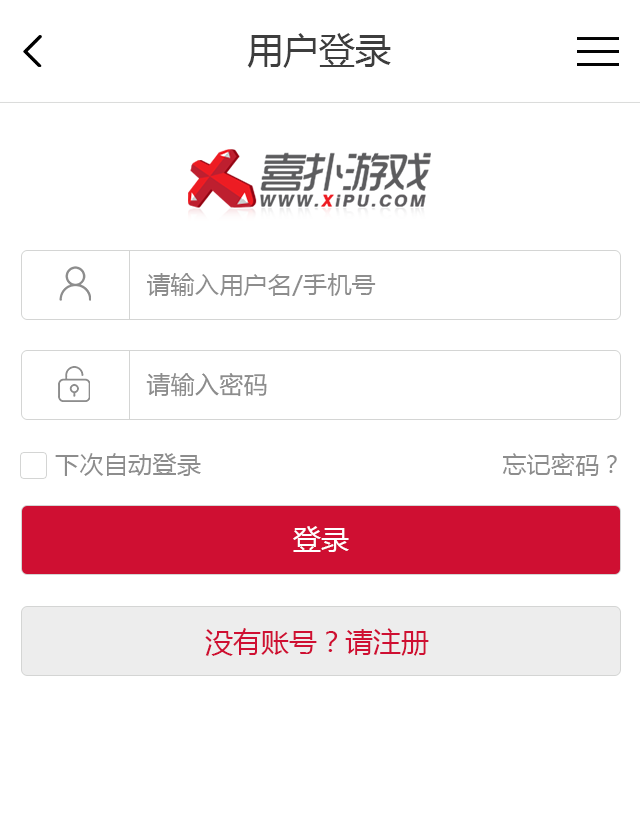
<style>
.page{position:relative;width:640px;height:813px;background:#ffffff}
.page>*{position:absolute;margin:0}
.t1{font:36px "MicrosoftYaHei";color:#3d3d3d}
.t2{font:24px "MicrosoftYaHei";letter-spacing:0.015em;color:#8d8d8d}
.t3{font:28px "MicrosoftYaHei";color:#ffffff}
.t4{font:28px "MicrosoftYaHei";color:#cf0f32}
</style>
<div class="page">
<p class="t1" style="left:247px;top:33px;width:144px;height:35px">用户登录</p>
<p class="t2" style="left:147px;top:273px;width:229px;height:23px">请输入用户名/手机号</p>
<p class="t2" style="left:146px;top:373px;width:121px;height:24px">请输入密码</p>
<p class="t2" style="left:55px;top:453px;width:146px;height:23px">下次自动登录</p>
<p class="t2" style="left:502px;top:453px;width:115px;height:23px">忘记密码？</p>
<p class="t3" style="left:293px;top:526px;width:56px;height:26px">登录</p>
<p class="t4" style="left:205px;top:628px;width:224px;height:28px">没有账号？请注册</p>
</div>
